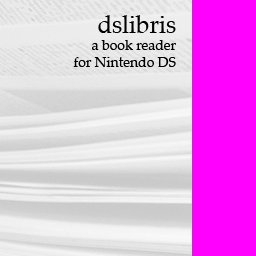
<style>
.page{position:relative;width:256px;height:256px;background:#ff00ff}
.page>*{position:absolute;margin:0}
.t1{font:14px "Palatino-Roman";color:#000000}
.t2{font:24px "Palatino-Roman";color:#000000}
</style>
<div class="page">
<p class="t1" style="left:73px;top:15px;width:103px;height:52px;text-align:right"><span class="t2">dslibris<br></span>a book reader<br>for Nintendo DS</p>
</div>
